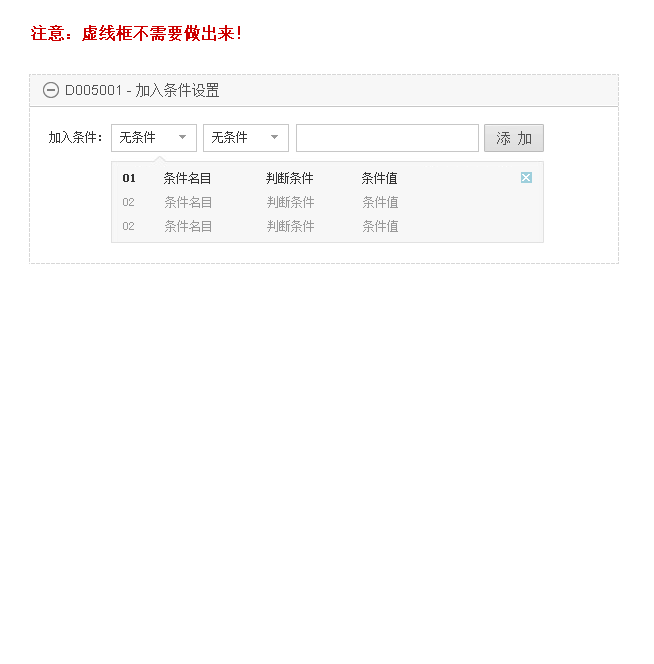
<style>
.page{position:relative;width:654px;height:664px;background:#ffffff}
.page>*{position:absolute;margin:0}
.t1{font:16px "SimSun";color:#cc0000;font-weight:bold}
.t2{font:14px "ArialMT";color:#525252}
.t3{font:14px "SimSun";color:#525252}
.t4{font:12px "SimSun";color:#333333}
.t5{font:12px/24px "SimSun";color:#999999}
.t6{font:12px/24px "SimSun";color:#333333;font-weight:bold}
</style>
<div class="page">
<p class="t1" style="left:31px;top:25px;width:209px;height:16px">注意：虚线框不需要做出来！</p>
<p class="t2" style="left:66px;top:83px;width:153px;height:14px">D005001 - <span class="t3">加入条件设置</span></p>
<p class="t4" style="left:49px;top:131px;width:52px;height:12px">加入条件：</p>
<p class="t4" style="left:120px;top:131px;width:35px;height:12px">无条件</p>
<p class="t4" style="left:212px;top:131px;width:35px;height:12px">无条件</p>
<p class="t5" style="left:123px;top:174px;width:275px;height:58px"><span class="t6">01<br></span>02     条件名目         判断条件        条件值<br>02     条件名目         判断条件        条件值</p>
<p class="t4" style="left:164px;top:172px;width:233px;height:12px">条件名目         判断条件        条件值</p>
</div>
